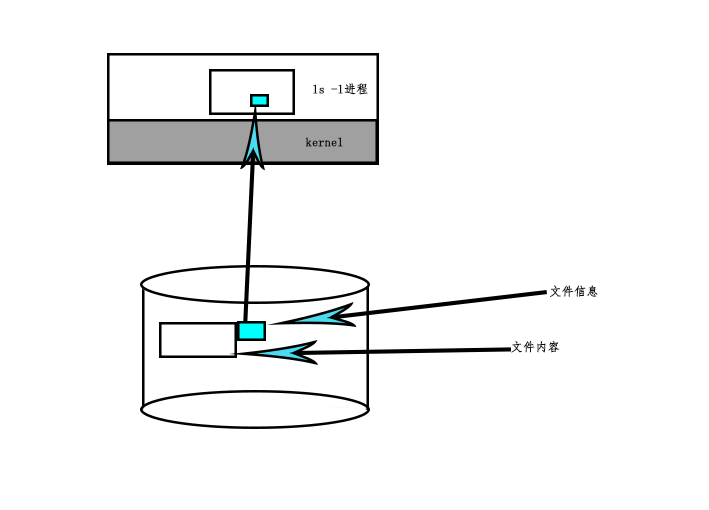
<style>
.page{position:relative;width:709px;height:510px;background:#ffffff}
.page>*{position:absolute;margin:0}
.t1{font:12px "FangSong";color:#111010;font-weight:bold}
</style>
<div class="page">
<p class="t1" style="left:313px;top:83px;width:55px;height:12px">ls -l进程</p>
<p class="t1" style="left:305px;top:137px;width:38px;height:10px">kernel</p>
<p class="t1" style="left:550px;top:285px;width:48px;height:12px">文件信息</p>
<p class="t1" style="left:511px;top:340px;width:49px;height:13px">文件内容</p>
</div>
